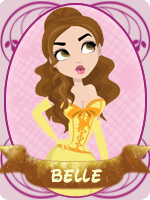
<style>
.page{position:relative;width:150px;height:200px}
.page>*{position:absolute;margin:0}
.t1{font:37.4px "Waltograph";color:#fcfac7}
</style>
<div class="page">
<p class="t1" style="left:50px;top:168px;width:53px;height:15px">belle</p>
</div>
